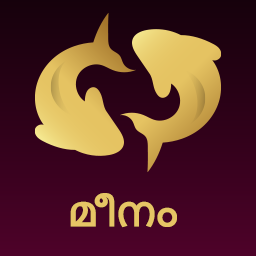
<style>
.page{position:relative;width:256px;height:256px}
.page>*{position:absolute;margin:0}
.t1{font:34.1px "NirmalaUI-Bold";letter-spacing:-0.05em;color:#e6c565;text-transform:uppercase;font-weight:bold}
</style>
<div class="page">
<p class="t1" style="left:70px;top:193px;width:107px;height:35px">മീനം</p>
</div>
